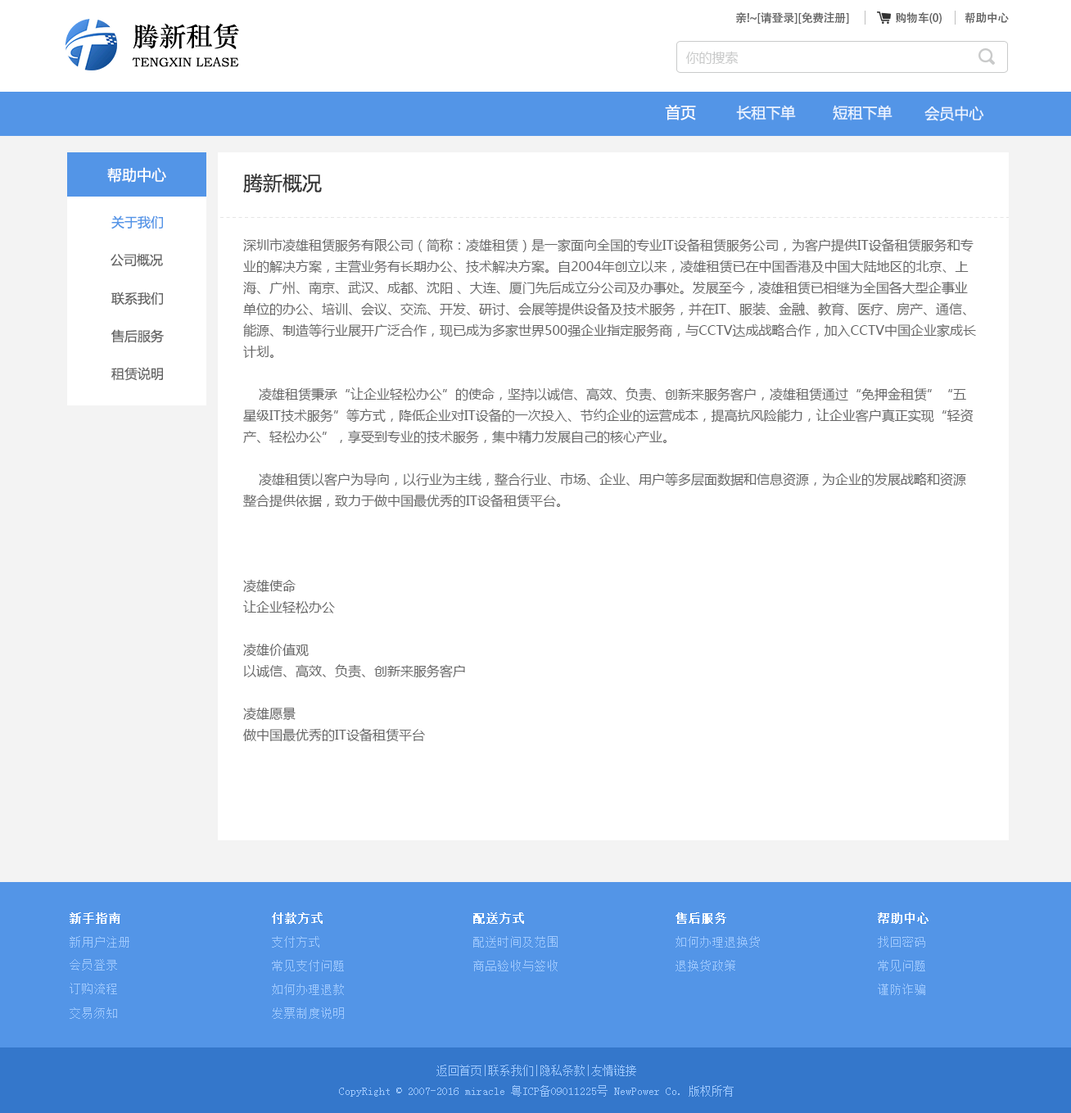
<style>
.page{position:relative;width:1071px;height:1113px;background:#ffffff}
.page>*{position:absolute;margin:0}
.t1{font:11.5px "AdobeHeitiStd-Regular";letter-spacing:-0.02em;color:#666666}
.t2{font:26.7px "STZhongsong";color:#000000}
.t3{font:13.1px "MicrosoftYaHei";color:#c9caca}
.t4{font:12.7px "STZhongsong";color:#000000}
.t5{font:15.4px "MicrosoftYaHei";color:#ffffff}
.t6{font:14.7px "MicrosoftYaHei";color:#eaf3ff}
.t7{font:14.7px "MicrosoftYaHei";color:#fefefe}
.t8{font:19.7px "MicrosoftYaHei";color:#333333}
.t9{font:13.1px "MicrosoftYaHei";color:#5395e7}
.t10{font:13.1px/21.3px "MicrosoftYaHei";color:#666666}
.t11{font:13.1px "MicrosoftYaHei";color:#666666}
.t12{font:12.3px "SimSun";color:#ffffff;font-weight:bold}
.t13{font:12.3px "SimSun";color:#9ec8fd}
.t14{font:11.5px "SimSun";color:#9ec8fd}
</style>
<div class="page">
<p class="t1" style="left:736px;top:11px;width:113px;height:13px">亲!~[请登录][免费注册]</p>
<p class="t1" style="left:896px;top:11px;width:46px;height:13px">购物车(0)</p>
<p class="t1" style="left:965px;top:12px;width:44px;height:12px">帮助中心</p>
<p class="t2" style="left:133px;top:23px;width:106px;height:26px">腾新租赁</p>
<p class="t3" style="left:686px;top:51px;width:53px;height:13px">你的搜索</p>
<p class="t4" style="left:132px;top:57px;width:107px;height:10px">TENGXIN LEASE</p>
<p class="t5" style="left:665px;top:105px;width:31px;height:15px">首页</p>
<p class="t6" style="left:736px;top:105px;width:60px;height:15px">长租下单</p>
<p class="t6" style="left:833px;top:105px;width:60px;height:15px">短租下单</p>
<p class="t6" style="left:925px;top:106px;width:59px;height:15px">会员中心</p>
<p class="t7" style="left:107px;top:167px;width:59px;height:16px">帮助中心</p>
<p class="t8" style="left:243px;top:173px;width:79px;height:20px">腾新概况</p>
<p class="t9" style="left:111px;top:215px;width:52px;height:14px">关于我们</p>
<p class="t10" style="left:243px;top:238px;width:733px;height:504px">深圳市凌雄租赁服务有限公司（简称：凌雄租赁）是一家面向全国的专业IT设备租赁服务公司，为客户提供IT设备租赁服务和专业的解决方案，主营业务有长期办公、技术解决方案。自2004年创立以来，凌雄租赁已在中国香港及中国大陆地区的北京、上海、广州、南京、武汉、成都、沈阳 、大连、厦门先后成立分公司及办事处。发展至今，凌雄租赁已相继为全国各大型企事业单位的办公、培训、会议、交流、开发、研讨、会展等提供设备及技术服务，并在IT、服装、金融、教育、医疗、房产、通信、能源、制造等行业展开广泛合作，现已成为多家世界500强企业指定服务商，与CCTV达成战略合作，加入CCTV中国企业家成长计划。<br><br>    凌雄租赁秉承“让企业轻松办公”的使命，坚持以诚信、高效、负责、创新来服务客户，凌雄租赁通过“免押金租赁”“五星级IT技术服务”等方式，降低企业对IT设备的一次投入、节约企业的运营成本，提高抗风险能力，让企业客户真正实现“轻资产、轻松办公”，享受到专业的技术服务，集中精力发展自己的核心产业。<br><br>    凌雄租赁以客户为导向，以行业为主线，整合行业、市场、企业、用户等多层面数据和信息资源，为企业的发展战略和资源整合提供依据，致力于做中国最优秀的IT设备租赁平台。<br><br><br><br>凌雄使命<br>让企业轻松办公<br><br>凌雄价值观<br>以诚信、高效、负责、创新来服务客户<br><br>凌雄愿景<br>做中国最优秀的IT设备租赁平台</p>
<p class="t11" style="left:111px;top:253px;width:52px;height:14px">公司概况</p>
<p class="t11" style="left:111px;top:292px;width:52px;height:14px">联系我们</p>
<p class="t11" style="left:111px;top:329px;width:53px;height:14px">售后服务</p>
<p class="t11" style="left:111px;top:367px;width:52px;height:14px">租赁说明</p>
<p class="t12" style="left:70px;top:912px;width:50px;height:12px">新手指南</p>
<p class="t12" style="left:272px;top:912px;width:51px;height:12px">付款方式</p>
<p class="t12" style="left:473px;top:912px;width:51px;height:12px">配送方式</p>
<p class="t12" style="left:676px;top:912px;width:50px;height:12px">售后服务</p>
<p class="t12" style="left:878px;top:912px;width:51px;height:12px">帮助中心</p>
<p class="t13" style="left:70px;top:936px;width:59px;height:12px">新用户注册</p>
<p class="t13" style="left:272px;top:936px;width:47px;height:12px">支付方式</p>
<p class="t13" style="left:473px;top:936px;width:85px;height:12px">配送时间及范围</p>
<p class="t13" style="left:676px;top:936px;width:84px;height:12px">如何办理退换货</p>
<p class="t13" style="left:878px;top:936px;width:48px;height:12px">找回密码</p>
<p class="t13" style="left:70px;top:959px;width:47px;height:12px">会员登录</p>
<p class="t13" style="left:272px;top:960px;width:72px;height:11px">常见支付问题</p>
<p class="t13" style="left:473px;top:960px;width:85px;height:11px">商品验收与签收</p>
<p class="t13" style="left:676px;top:960px;width:59px;height:11px">退换货政策</p>
<p class="t13" style="left:878px;top:960px;width:48px;height:11px">常见问题</p>
<p class="t13" style="left:70px;top:983px;width:47px;height:11px">订购流程</p>
<p class="t13" style="left:272px;top:984px;width:72px;height:11px">如何办理退款</p>
<p class="t13" style="left:878px;top:984px;width:48px;height:11px">谨防诈骗</p>
<p class="t13" style="left:70px;top:1007px;width:47px;height:12px">交易须知</p>
<p class="t13" style="left:272px;top:1007px;width:72px;height:12px">发票制度说明</p>
<p class="t14" style="left:339px;top:1065px;width:395px;height:32px;text-align:center">返回首页|联系我们|隐私条款|友情链接<br>CopyRight © 2007-2016 miracle 粤ICP备09011225号 NewPower Co. 版权所有</p>
</div>
